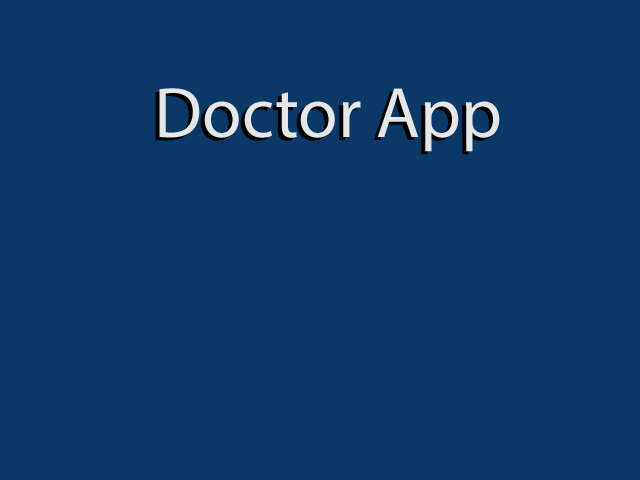
<style>
.page{position:relative;width:640px;height:480px;background:#0b3967}
.page>*{position:absolute;margin:0}
.t1{font:72px "MyriadPro-Regular";color:#e4e6e8}
</style>
<div class="page">
<p class="t1" style="left:159px;top:88px;width:341px;height:64px">Doctor App</p>
</div>
